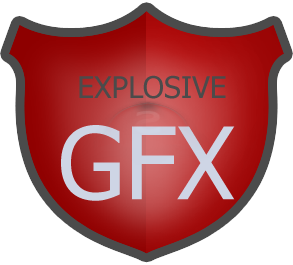
<style>
.page{position:relative;width:293px;height:265px;background:#ffffff}
.page>*{position:absolute;margin:0}
.t1{font:30px "Tahoma";color:#4b4b4b;text-transform:uppercase}
.t2{font:100px "Tahoma";color:#ced5e5}
</style>
<div class="page">
<p class="t1" style="left:79px;top:75px;width:147px;height:24px">explosive</p>
<p class="t2" style="left:61px;top:125px;width:174px;height:76px">GFX</p>
</div>
